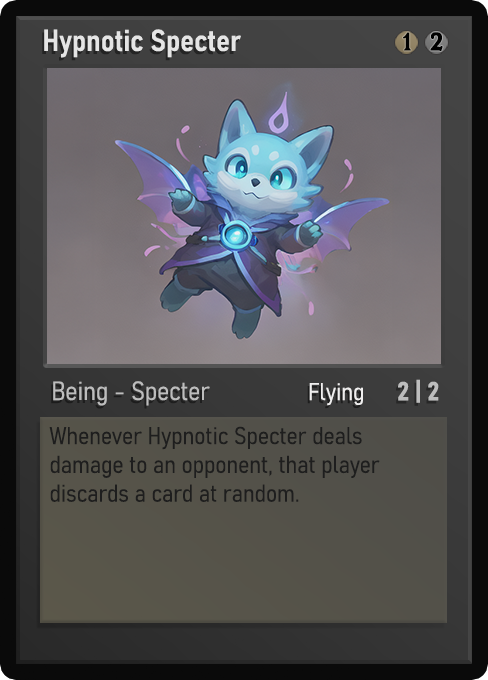
<style>
.page{position:relative;width:488px;height:680px}
.page>*{position:absolute;margin:0}
.t1{font:30px "Bahnschrift-SemiBoldSemiCondensed";color:#f2f2f2;font-weight:bold}
.t2{font:25px "WTRRoycroft";color:#000000;font-weight:bold;scale:1.09 1}
.t3{font:26px "Bahnschrift-LightSemiCondensed";color:#c8c8c8;font-weight:bold}
.t4{font:24px "Bahnschrift-LightSemiCondensed";color:#f0efef;font-weight:bold}
.t5{font:26px "Bahnschrift-BoldSemiCondensed";color:#bdbdbd;font-weight:bold}
.t6{font:24px "Bahnschrift-LightSemiCondensed";color:#1e1e1e;font-weight:bold}
</style>
<div class="page">
<p class="t1" style="left:44px;top:29px;width:197px;height:29px;opacity:0.9">Hypnotic Specter</p>
<p class="t2" style="left:403px;top:32px;width:8px;height:19px">1</p>
<p class="t2" style="left:430px;top:32px;width:13px;height:19px">2</p>
<p class="t3" style="left:53px;top:381px;width:157px;height:25px;opacity:0.9">Being - Specter</p>
<p class="t4" style="left:309px;top:383px;width:54px;height:23px">Flying</p>
<p class="t5" style="left:398px;top:379px;width:41px;height:24px">2 | 2</p>
<p class="t6" style="left:49px;top:426px;width:331px;height:76px">Whenever Hypnotic Specter deals damage to an opponent, that player discards a card at random.</p>
</div>
